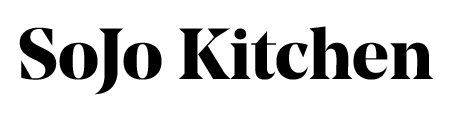
<style>
.page{position:relative;width:457px;height:118px;background:#ffffff}
.page>*{position:absolute;margin:0}
.t1{font:72px "NoeDisplay-Bold";color:#000000}
</style>
<div class="page">
<p class="t1" style="left:19px;top:26px;width:415px;height:69px">SoJo Kitchen</p>
</div>
